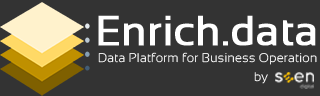
<style>
.page{position:relative;width:320px;height:96px;background:#333333}
.page>*{position:absolute;margin:0}
.t1{font:41.7px "Sansation-Regular";color:#ffffff;font-weight:bold}
.t2{font:12.5px "Sansation-Light";letter-spacing:0.025em}
.t3{font:12.5px "Sansation-Light"}
</style>
<div class="page">
<p class="t1" style="left:98px;top:15px;width:218px;height:31px">Enrich.data</p>
<p class="t2" style="left:98px;top:52px;width:219px;height:13px">Data Platform for Business Operation</p>
<p class="t3" style="left:254px;top:72px;width:14px;height:12px">by</p>
</div>
